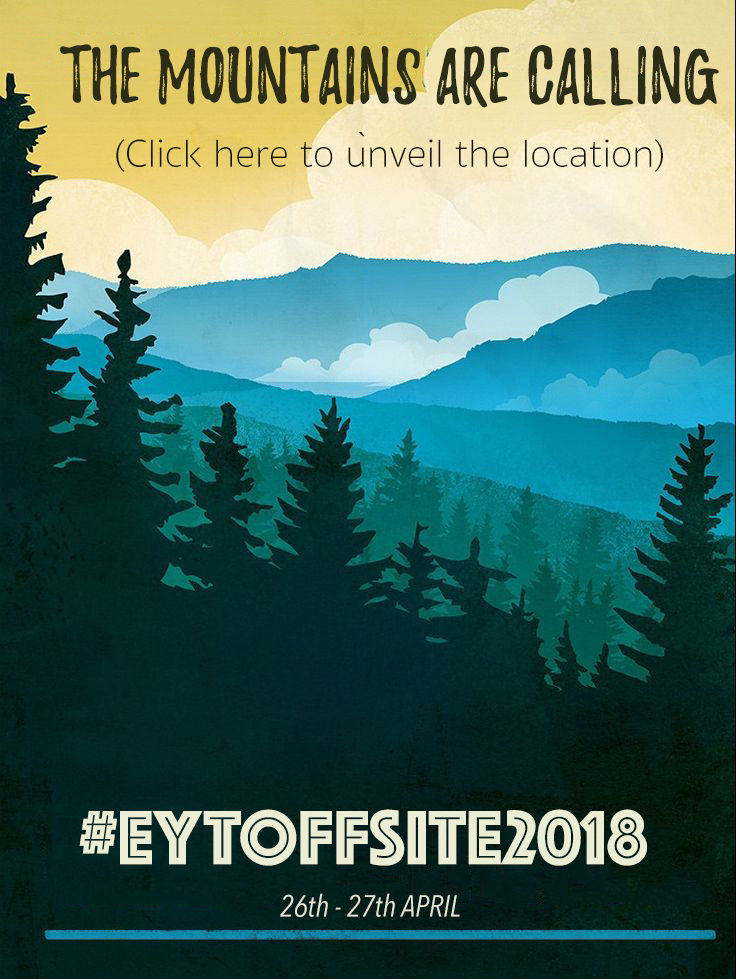
<style>
.page{position:relative;width:736px;height:979px}
.page>*{position:absolute;margin:0}
.t1{font:70px "Playlist-Caps";color:#2c2d17}
.t2{font:30px "AvenirNext-Italic";color:#000000}
.t3{font:40px "SukhumvitSet-Thin";color:#161706}
.t4{font:80px "Phosphate-Inline";color:#ecedd5}
.t5{font:30px "AvenirNextCondensed-Italic";color:#e5e6d5}
</style>
<div class="page">
<p class="t1" style="left:60px;top:44px;width:659px;height:64px">THE Mountains are calling</p>
<p class="t2" style="left:358px;top:132px;width:7px;height:5px">`</p>
<p class="t3" style="left:116px;top:139px;width:547px;height:33px">(Click here to unveil the location)</p>
<p class="t4" style="left:79px;top:809px;width:568px;height:57px">#EYTOFFSITE2018</p>
<p class="t5" style="left:280px;top:893px;width:180px;height:24px">26th - 27th APRIL</p>
</div>
